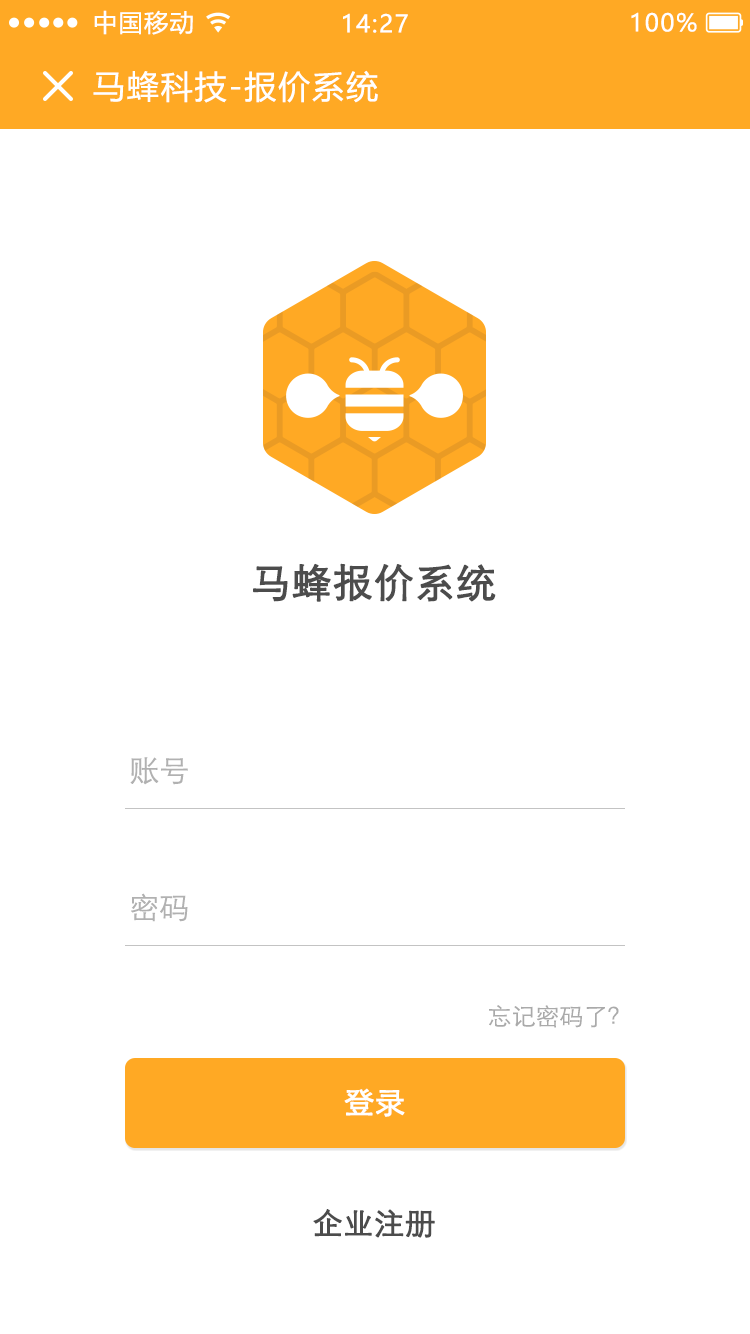
<style>
.page{position:relative;width:750px;height:1334px;background:#ffffff}
.page>*{position:absolute;margin:0}
.t1{font:24px "MicrosoftYaHeiUI";letter-spacing:0.06em;color:#ffffff}
.t2{font:32px "MicrosoftYaHeiUI";letter-spacing:0.06em;color:#ffffff}
.t3{font:40px "STXihei";color:#4c4c4c;font-weight:bold}
.t4{font:30px "STXihei";color:#b1b1b1}
.t5{font:24px "STXihei";color:#aaaaaa}
.t6{font:30px "STXihei";color:#ffffff;font-weight:bold}
.t7{font:30px "STXihei";color:#4c4c4c;font-weight:bold}
</style>
<div class="page">
<p class="t1" style="left:94px;top:10px;width:99px;height:25px">中国移动</p>
<p class="t1" style="left:343px;top:13px;width:65px;height:20px">14:27</p>
<p class="t1" style="left:631px;top:12px;width:66px;height:20px">100%</p>
<p class="t2" style="left:93px;top:70px;width:285px;height:33px">马蜂科技-报价系统</p>
<p class="t3" style="left:253px;top:563px;width:243px;height:39px">马蜂报价系统</p>
<p class="t4" style="left:130px;top:757px;width:58px;height:28px">账号</p>
<p class="t4" style="left:131px;top:893px;width:57px;height:29px">密码</p>
<p class="t5" style="left:489px;top:1005px;width:130px;height:23px">忘记密码了？</p>
<p class="t6" style="left:344px;top:1088px;width:61px;height:29px">登录</p>
<p class="t7" style="left:313px;top:1209px;width:122px;height:29px">企业注册</p>
</div>
